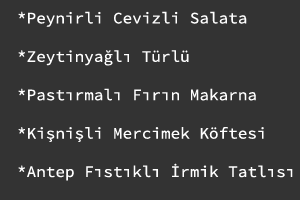
<style>
.page{position:relative;width:300px;height:200px;background:#333333}
.page>*{position:absolute;margin:0}
.t1{font:16px "SourceCodePro-Regular";color:#ffffff}
</style>
<div class="page">
<p class="t1" style="left:18px;top:11px;width:275px;height:170px">*Peynirli Cevizli Salata<br><br>*Zeytinyağlı Türlü<br><br>*Pastırmalı Fırın Makarna<br><br>*Kişnişli Mercimek Köftesi<br><br>*Antep Fıstıklı İrmik Tatlısı</p>
</div>
